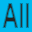
<style>
.page{position:relative;width:32px;height:32px;background:#00baef}
.page>*{position:absolute;margin:0}
.t1{font:34.4px "Arial-BoldMT";scale:0.63 1}
</style>
<div class="page">
<p class="t1" style="left:2px;top:3px;width:27px;height:25px">All</p>
</div>
